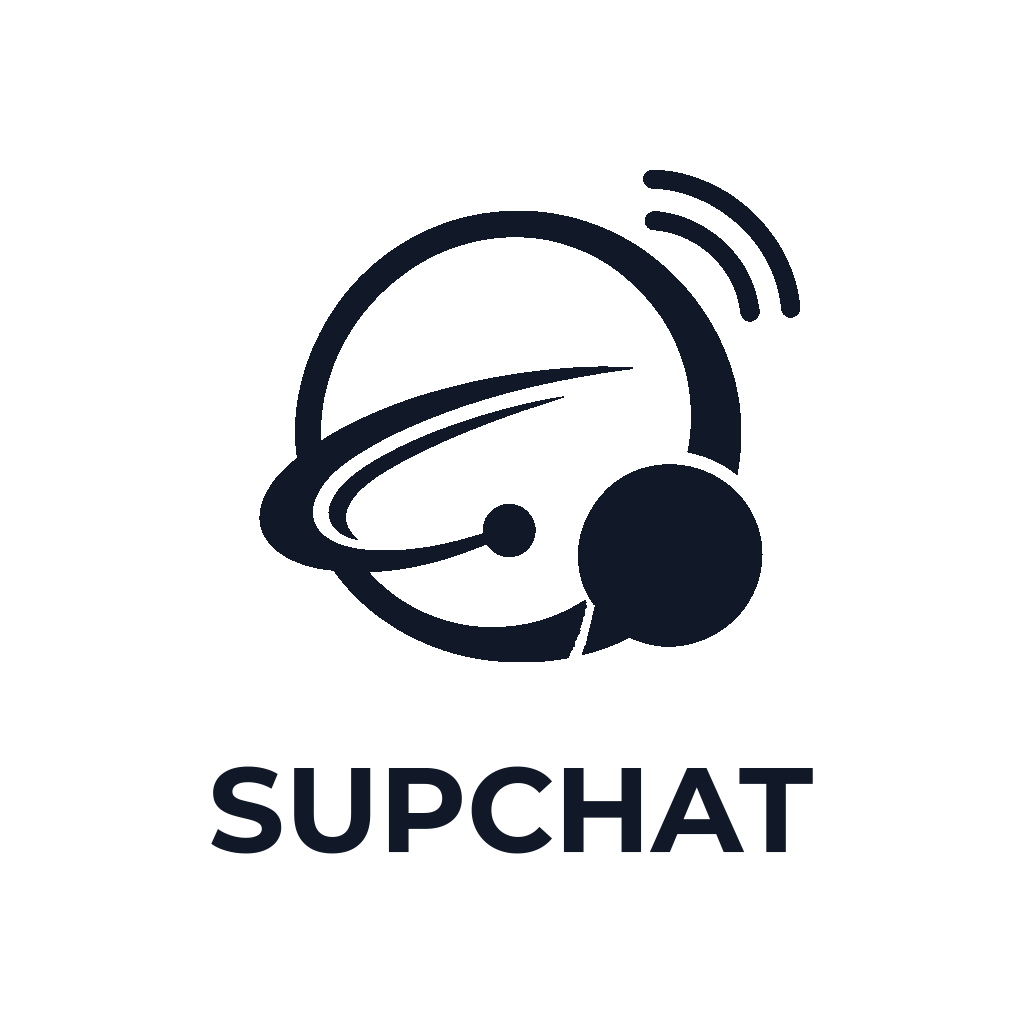
<style>
.page{position:relative;width:1024px;height:1024px;background:#ffffff}
.page>*{position:absolute;margin:0}
.t1{font:120px "Montserrat-Bold";color:#111827}
</style>
<div class="page">
<p class="t1" style="left:211px;top:766px;width:602px;height:88px">SUPCHAT</p>
</div>
